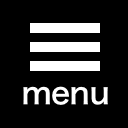
<style>
.page{position:relative;width:128px;height:128px;background:#000000}
.page>*{position:absolute;margin:0}
.t1{font:30px "HiraKakuProN-W6";letter-spacing:-0.02em;color:#ffffff}
</style>
<div class="page">
<p class="t1" style="left:23px;top:86px;width:85px;height:19px">menu</p>
</div>
